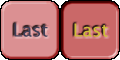
<style>
.page{position:relative;width:120px;height:60px;background:#db9092}
.page>*{position:absolute;margin:0}
.t1{font:18px "LucidaSans";color:#414058}
.t2{font:18px "LucidaSans";color:#cebe38}
</style>
<div class="page">
<p class="t1" style="left:14px;top:23px;width:34px;height:14px">Last</p>
<p class="t2" style="left:74px;top:23px;width:34px;height:14px">Last</p>
</div>
